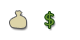
<style>
.page{position:relative;width:80px;height:40px;background:#ffffff}
.page>*{position:absolute;margin:0}
.t1{font:17px "Verdana";color:#699130}
</style>
<div class="page">
<p class="t1" style="left:45px;top:12px;width:9px;height:16px">$</p>
</div>
